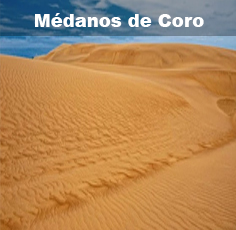
<style>
.page{position:relative;width:236px;height:230px}
.page>*{position:absolute;margin:0}
.t1{font:18px "Arial-Black";color:#ffffff}
</style>
<div class="page">
<p class="t1" style="left:35px;top:13px;width:169px;height:14px">Médanos de Coro</p>
</div>
